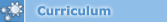
<style>
.page{position:relative;width:167px;height:22px;background:#8fbee8}
.page>*{position:absolute;margin:0}
.t1{font:12px "Verdana-Bold";color:#5292cc}
</style>
<div class="page">
<p class="t1" style="left:37px;top:6px;width:74px;height:10px">Curriculum</p>
</div>
